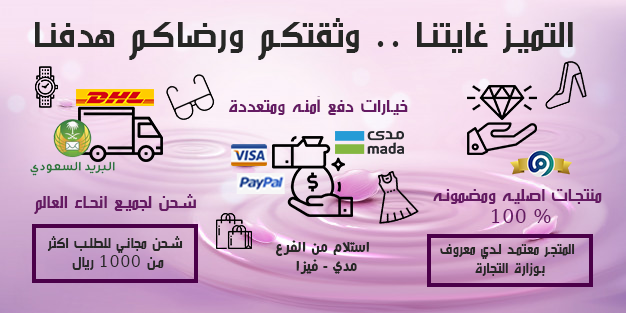
<style>
.page{position:relative;width:626px;height:313px}
.page>*{position:absolute;margin:0}
.t1{font:43px "ae_AlArabiya";letter-spacing:0.03em;color:#262725;scale:0.96 1}
.t2{font:20.8px "ae_AlArabiya";letter-spacing:0.03em;color:#651a63;scale:0.96 1}
.t3{font:19.4px "ae_AlArabiya";letter-spacing:0.03em;color:#651a63;scale:0.96 1}
.t4{font:16.6px "ae_AlArabiya";letter-spacing:0.03em;color:#262725;scale:0.96 1}
.t5{font:16.6px "HacenCasablancaHeavy";letter-spacing:0.03em;color:#262725;scale:0.96 1}
</style>
<div class="page">
<p class="t1" style="left:35px;top:18px;width:538px;height:42px">التميز غايتنا .. وثقتكم ورضاكم هدفنا</p>
<p class="t2" style="left:229px;top:96px;width:179px;height:19px">خيارات دفع آمنه ومتعددة</p>
<p class="t2" style="left:34px;top:194px;width:162px;height:20px">شحن لجميع انحاء العالم</p>
<p class="t2" style="left:433px;top:189px;width:169px;height:34px;text-align:center">منتجات اصليه ومضمونه<br><span class="t3"> 100 %</span></p>
<p class="t4" style="left:47px;top:236px;width:136px;height:34px;text-align:center">شحن مجاني للطلب اكثر<br> من 1000 ريال</p>
<p class="t5" style="left:275px;top:240px;width:94px;height:34px;text-align:center">استلام من الفرع <br> مدي - فيزا</p>
<p class="t4" style="left:440px;top:244px;width:135px;height:32px;text-align:center">المتجر معتمد لدي معروف<br> بوزارة التجارة</p>
</div>
